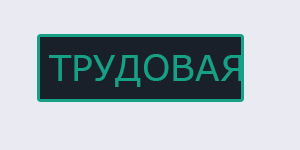
<style>
.page{position:relative;width:300px;height:150px;background:#eaeaf2}
.page>*{position:absolute;margin:0}
.t1{font:36px "Verdana";color:#16a085}
</style>
<div class="page">
<p class="t1" style="left:49px;top:54px;width:193px;height:33px">ТРУДОВАЯ</p>
</div>
